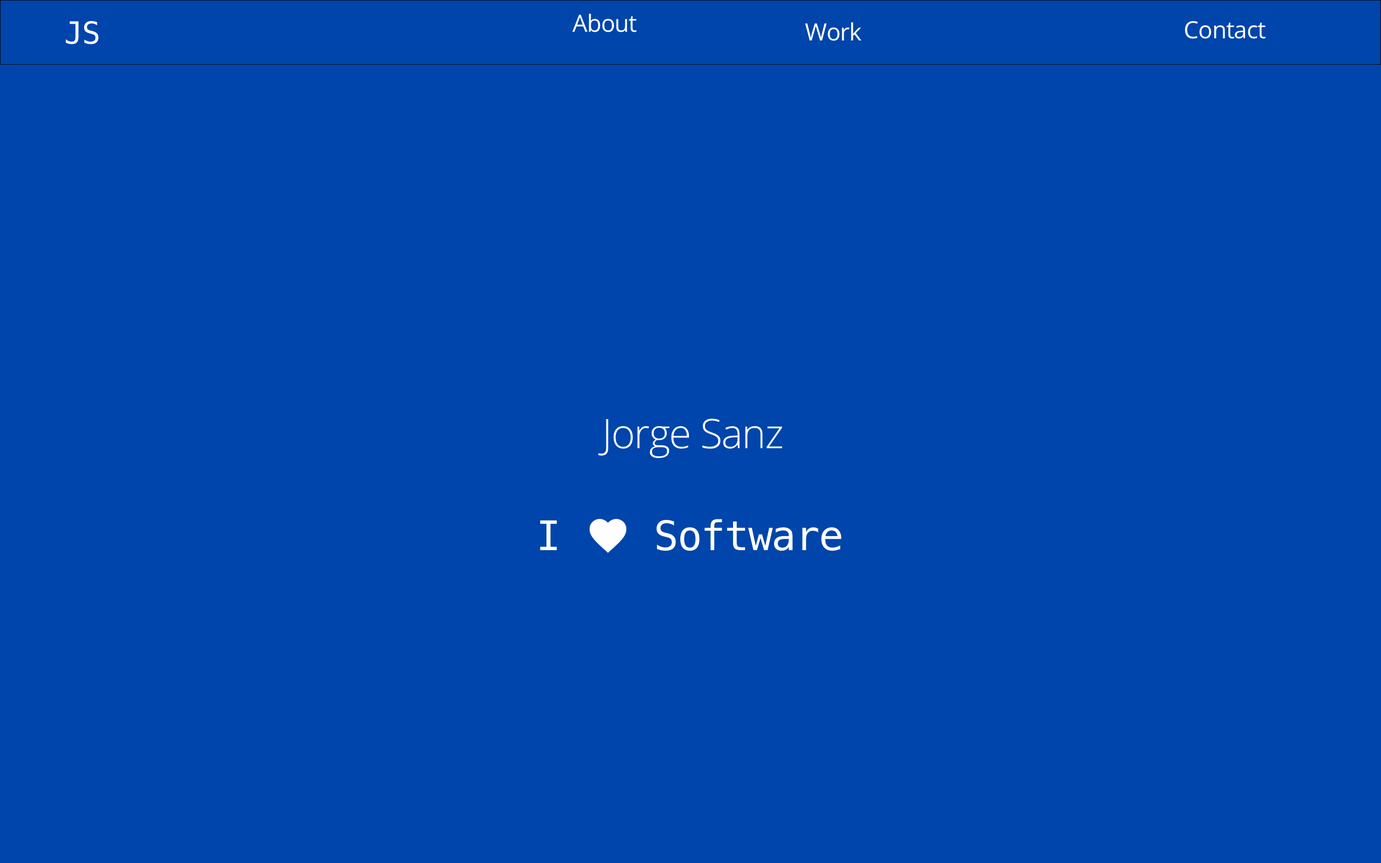
<style>
.page{position:relative;width:1381px;height:863px;background:#0045ab}
.page>*{position:absolute;margin:0}
.t1{font:23.8px "OpenSans";letter-spacing:-0.025em;color:#ffffff}
.t2{font:30.6px "Menlo-Regular";letter-spacing:-0.025em;color:#ffffff}
.t3{font:40.8px "OpenSans-Light";letter-spacing:-0.025em;color:#ffffff}
.t4{font:40.8px "Menlo-Regular";letter-spacing:-0.025em;color:#ffffff}
</style>
<div class="page">
<p class="t1" style="left:572px;top:13px;width:65px;height:19px">About</p>
<p class="t2" style="left:66px;top:21px;width:33px;height:23px">JS</p>
<p class="t1" style="left:805px;top:22px;width:57px;height:19px">Work</p>
<p class="t1" style="left:1185px;top:21px;width:81px;height:18px">Contact</p>
<p class="t3" style="left:598px;top:419px;width:184px;height:40px">Jorge Sanz</p>
<p class="t4" style="left:540px;top:519px;width:302px;height:32px">I    Software</p>
</div>
